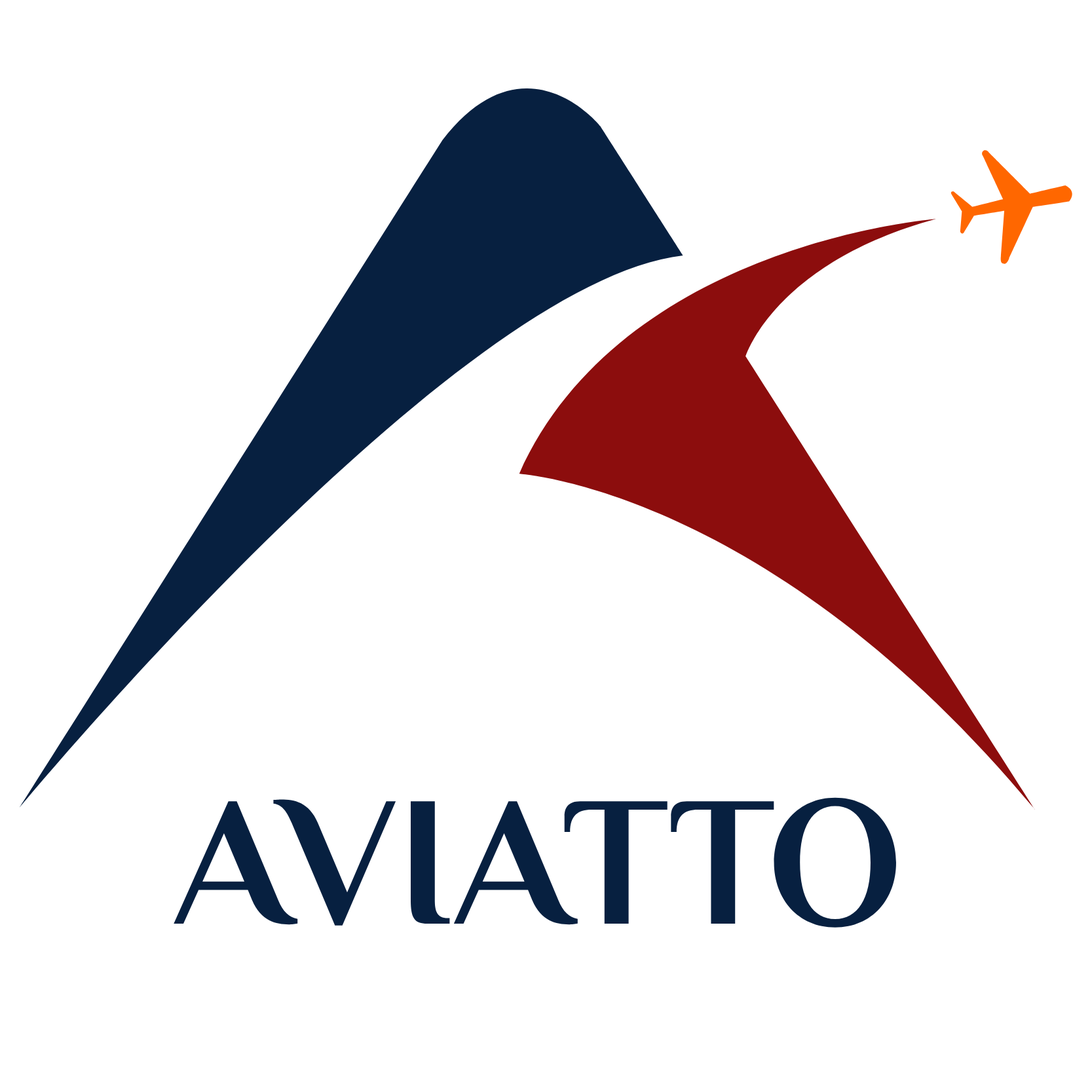
<style>
.page{position:relative;width:1092px;height:1092px;background:#ffffff}
.page>*{position:absolute;margin:0}
.t1{font:185.3px "ElMessiri-Bold";color:#072040}
</style>
<div class="page">
<p class="t1" style="left:174px;top:797px;width:722px;height:131px">AVIATTO</p>
</div>
